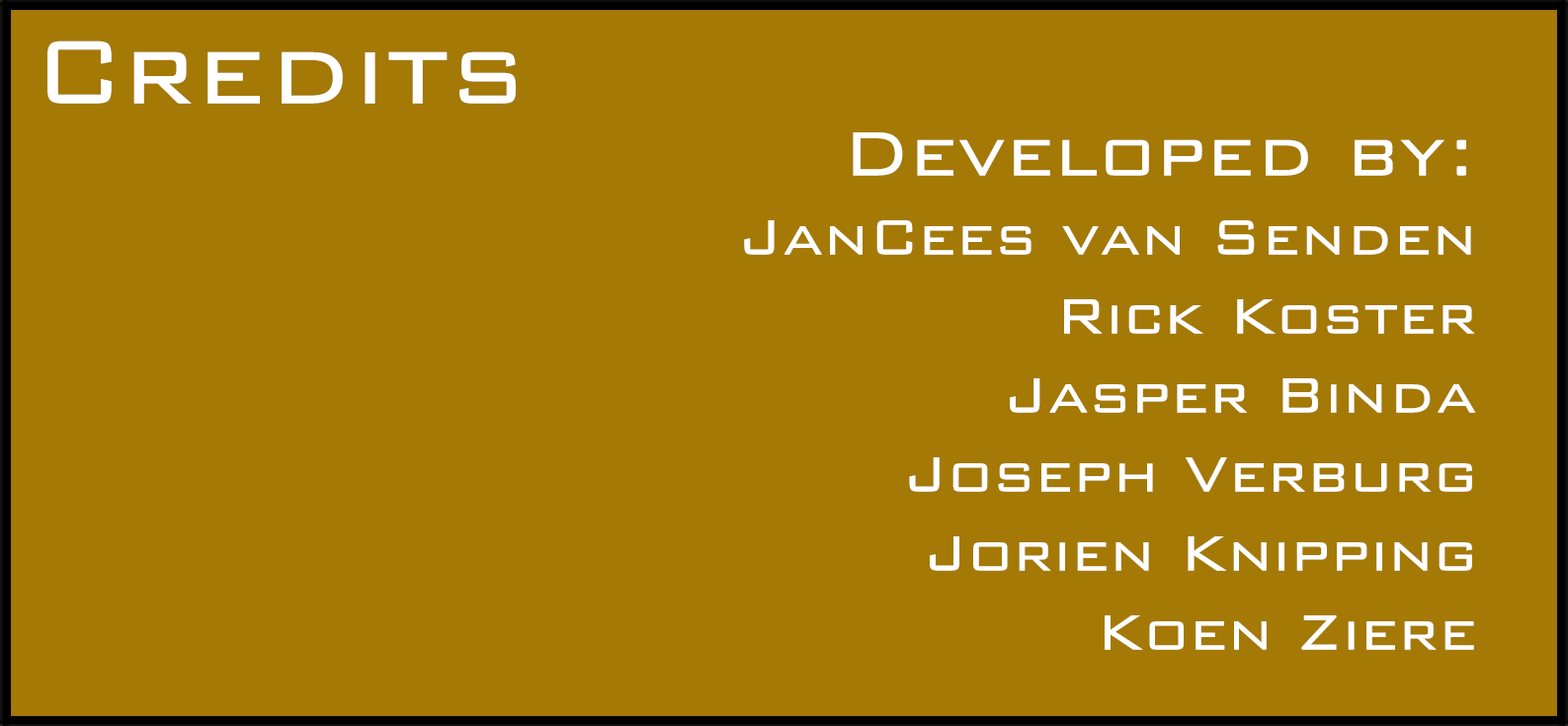
<style>
.page{position:relative;width:1568px;height:726px;background:#a47905}
.page>*{position:absolute;margin:0}
.t1{font:120.2px "BankGothic-Light";color:#ffffff}
.t2{font:65.9px "BankGothic-Light";color:#ffffff}
.t3{font:83.2px "BankGothic-Light";color:#ffffff}
</style>
<div class="page">
<p class="t1" style="left:47px;top:41px;width:469px;height:63px">Credits</p>
<p class="t2" style="left:744px;top:132px;width:732px;height:518px;text-align:right"><span class="t3">Developed by:<br></span>JanCees van Senden<br>Rick Koster<br>Jasper Binda<br>Joseph Verburg<br>Jorien Knipping<br>Koen Ziere</p>
</div>
